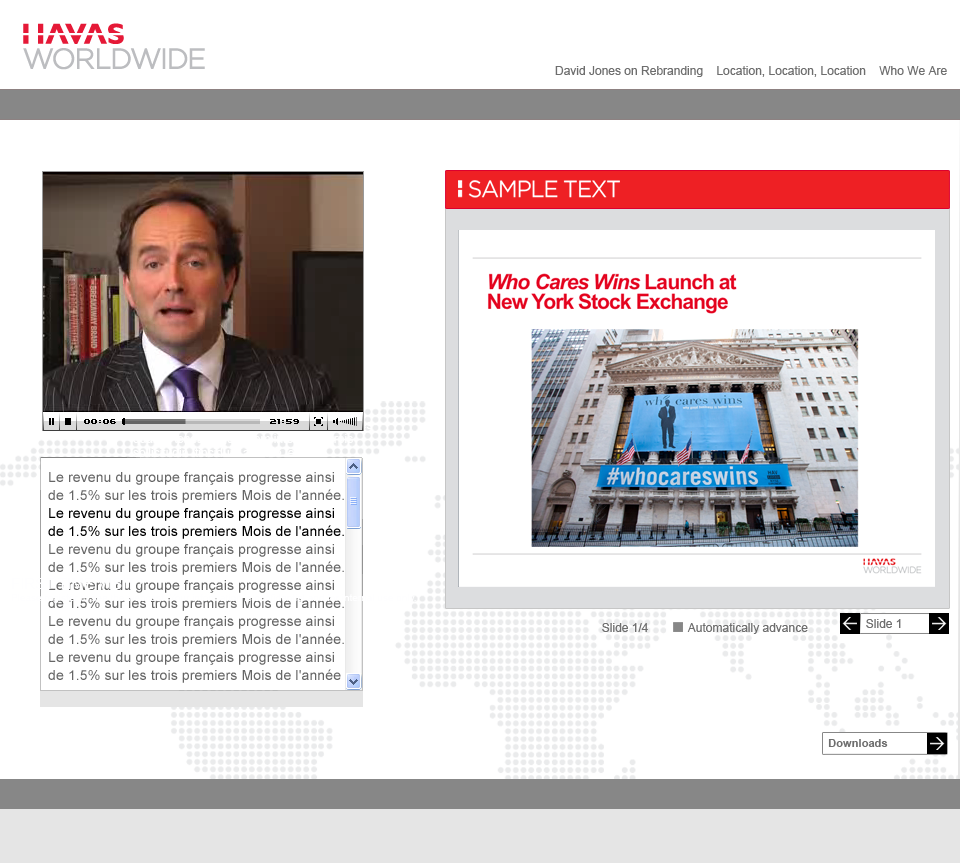
<style>
.page{position:relative;width:960px;height:863px;background:#ffffff}
.page>*{position:absolute;margin:0}
.t1{font:12px "ArialMT";color:#6e6e6e}
.t2{font:14px/18px "ArialMT";letter-spacing:0.01em;color:#666666}
.t3{font:14px/18px "ArialMT";letter-spacing:0.01em;color:#000000}
.t4{font:11.1px "Arial-BoldMT";color:#6e6e6e}
</style>
<div class="page">
<p class="t1" style="left:555px;top:66px;width:392px;height:11px">David Jones on Rebranding    Location, Location, Location    Who We Are</p>
<p class="t2" style="left:48px;top:472px;width:296px;height:211px">Le revenu du groupe français progresse ainsi <br>de 1.5% sur les trois premiers Mois de l'année. <br><span class="t3">Le revenu du groupe français progresse ainsi <br>de 1.5% sur les trois premiers Mois de l'année. <br></span>Le revenu du groupe français progresse ainsi <br>de 1.5% sur les trois premiers Mois de l'année. <br>Le revenu du groupe français progresse ainsi <br>de 1.5% sur les trois premiers Mois de l'année. <br>Le revenu du groupe français progresse ainsi <br>de 1.5% sur les trois premiers Mois de l'année. <br>Le revenu du groupe français progresse ainsi <br>de 1.5% sur les trois premiers Mois de l'année</p>
<p class="t1" style="left:602px;top:623px;width:46px;height:9px">Slide 1/4</p>
<p class="t1" style="left:687px;top:623px;width:121px;height:11px">Automatically advance</p>
<p class="t1" style="left:866px;top:619px;width:35px;height:9px">Slide 1</p>
<p class="t4" style="left:828px;top:739px;width:60px;height:8px">Downloads</p>
</div>
